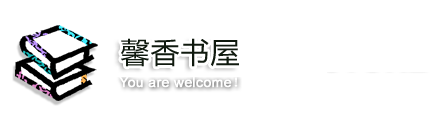
<style>
.page{position:relative;width:440px;height:121px;background:#ffffff}
.page>*{position:absolute;margin:0}
.t1{font:30px "ZpixEX2";color:#0f190e}
</style>
<div class="page">
<p class="t1" style="left:121px;top:38px;width:118px;height:29px">馨香书屋</p>
</div>
